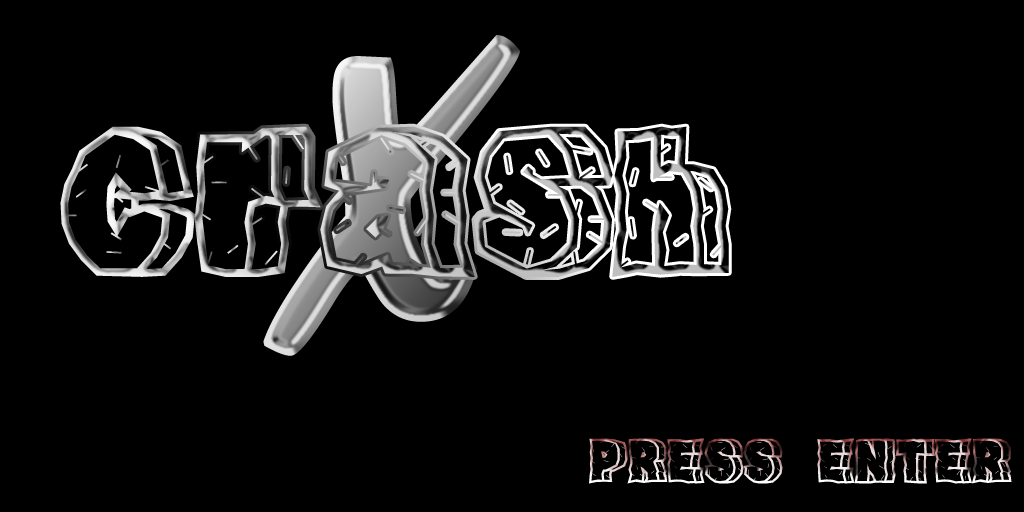
<style>
.page{position:relative;width:1024px;height:512px;background:#000000}
.page>*{position:absolute;margin:0}
.t1{font:500px "SHELMAN"}
.t2{font:150px "RockFont"}
.t3{font:45px "RockFont"}
</style>
<div class="page">
<p class="t1" style="left:263px;top:35px;width:258px;height:321px">X</p>
<p class="t2" style="left:60px;top:126px;width:669px;height:151px">Crash</p>
<p class="t3" style="left:589px;top:438px;width:423px;height:46px">PRESS      ENTER</p>
</div>
